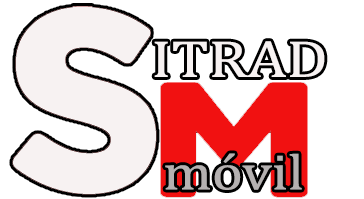
<style>
.page{position:relative;width:364px;height:199px;background:#ffffff}
.page>*{position:absolute;margin:0}
.t1{font:52.5px "Cambria";color:#f7f2f2;scale:1.19 1}
.t2{font:51px "Cambria";color:#b5b1b1;scale:1.15 1}
</style>
<div class="page">
<p class="t1" style="left:154px;top:41px;width:171px;height:36px">ITRAD</p>
<p class="t2" style="left:165px;top:153px;width:137px;height:37px">móvil</p>
</div>
